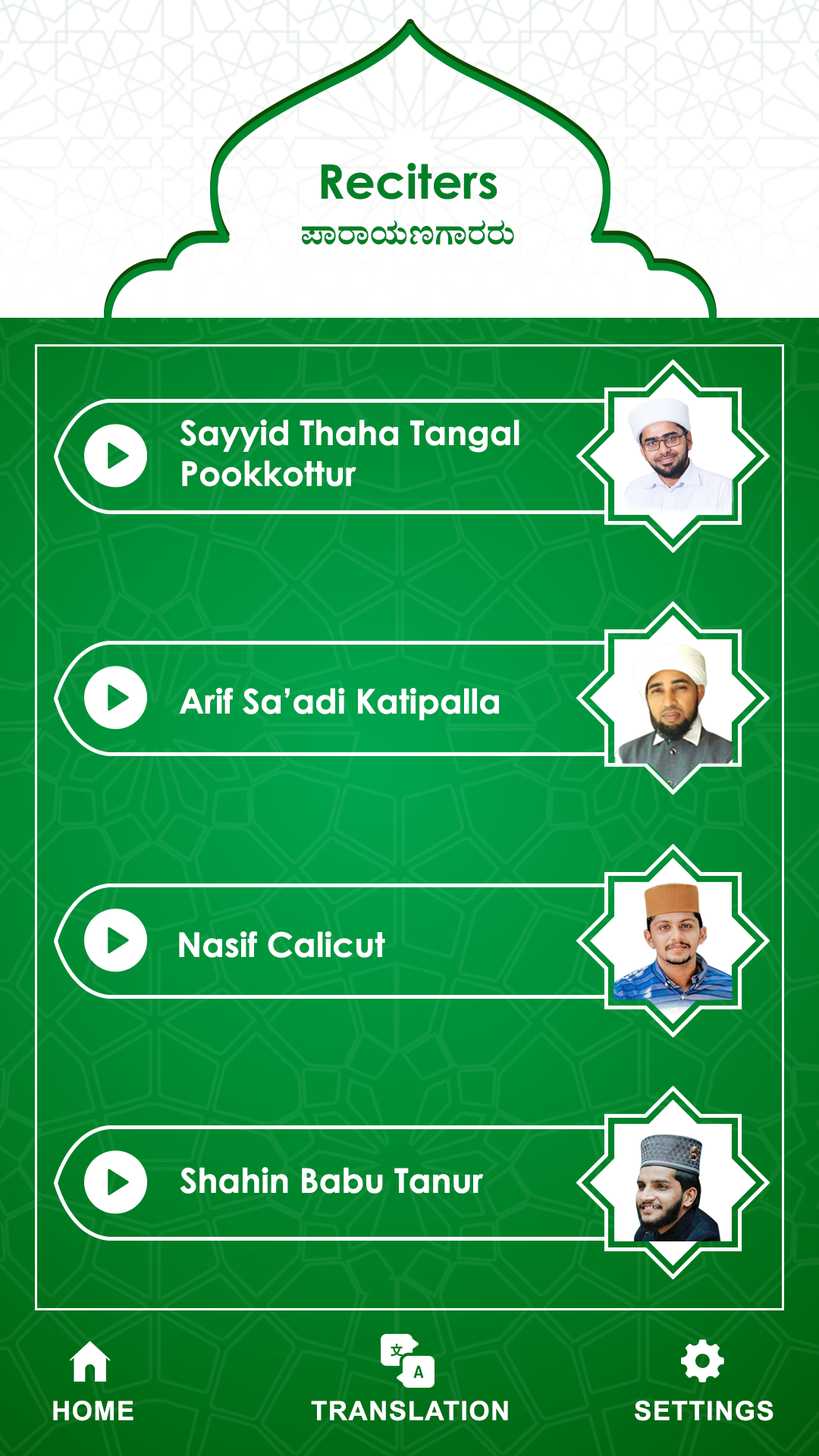
<style>
.page{position:relative;width:819px;height:1456px;background:#ffffff}
.page>*{position:absolute;margin:0}
.t1{font:47.5px "CenturyGothic-Bold";color:#008027}
.t2{font:36.4px "Nudi01eBold";color:#008027}
.t3{font:33.9px "CenturyGothic-Bold";color:#ffffff}
.t4{font:26.5px "Arial-BoldMT";letter-spacing:0.04em;color:#ffffff}
</style>
<div class="page">
<p class="t1" style="left:321px;top:162px;width:176px;height:37px">Reciters</p>
<p class="t2" style="left:302px;top:220px;width:212px;height:25px">¥ÁgÁAiÀÄtUÁgÀgÀÄ</p>
<p class="t3" style="left:180px;top:419px;width:339px;height:68px">Sayyid Thaha Tangal<br>Pookkottur</p>
<p class="t3" style="left:180px;top:688px;width:319px;height:32px">Arif Sa’adi Katipalla</p>
<p class="t3" style="left:179px;top:931px;width:206px;height:27px">Nasif Calicut</p>
<p class="t3" style="left:180px;top:1167px;width:303px;height:27px">Shahin Babu Tanur</p>
<p class="t4" style="left:53px;top:1401px;width:80px;height:20px">HOME</p>
<p class="t4" style="left:311px;top:1401px;width:197px;height:20px">TRANSLATION</p>
<p class="t4" style="left:635px;top:1401px;width:138px;height:20px">SETTINGS</p>
</div>
